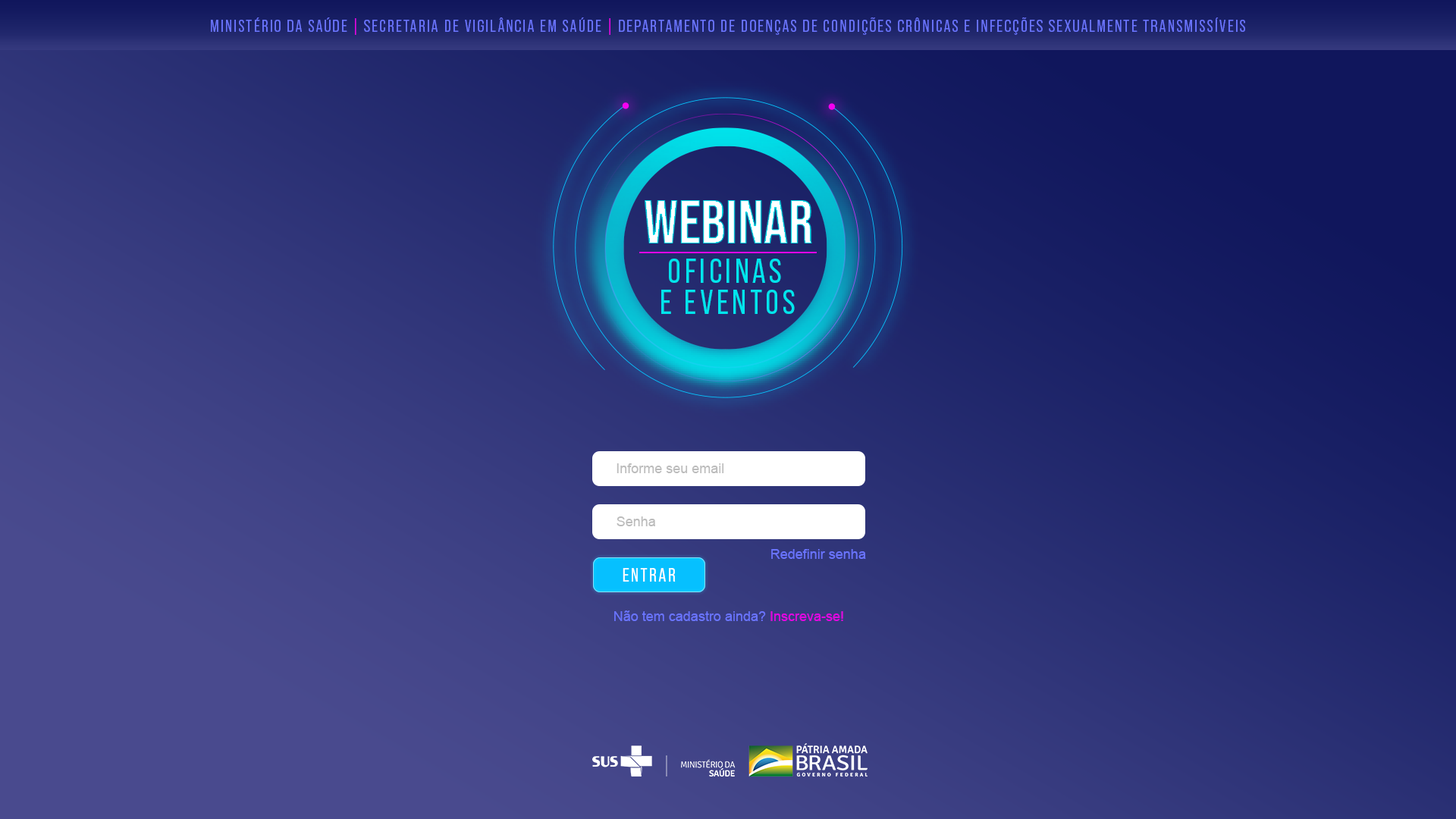
<style>
.page{position:relative;width:1456px;height:819px}
.page>*{position:absolute;margin:0}
.t1{font:16.7px "BebasNeuePro-Regular";letter-spacing:0.1em;color:#6a74ff;text-transform:uppercase}
.t2{font:16.7px "BebasNeuePro-Regular";letter-spacing:0.1em;color:#6a74ff}
.t3{font:16.7px "BebasNeuePro-Regular";letter-spacing:0.1em;color:#e504e5}
.t4{font:34px/30.5px "BebasNeuePro-Regular";letter-spacing:0.1em;color:#00e5ed}
.t5{font:13.6px "ArialMT";color:#bcbcbc}
.t6{font:13.6px "ArialMT";color:#6a74ff}
.t7{font:18.8px "BebasNeuePro-Regular";letter-spacing:0.1em;color:#ffffff}
.t8{font:13.6px "ArialMT";color:#e304e3}
</style>
<div class="page">
<p class="t1" style="left:211px;top:17px;width:1034px;height:18px"><span class="t2">MINISTÉRIO DA SAÚDE </span><span class="t3">|</span><span class="t2"> SECRETARIA DE VIGILÂNCIA EM SAÚDE </span><span class="t3">| </span>Departamento de Doenças de Condições Crônicas e Infecções Sexualmente Transmissíveis</p>
<p class="t4" style="left:661px;top:259px;width:134px;height:55px;text-align:center">OFICINAS <br>E EVENTOS</p>
<p class="t5" style="left:617px;top:463px;width:107px;height:10px">Informe seu email</p>
<p class="t5" style="left:617px;top:516px;width:38px;height:10px">Senha</p>
<p class="t6" style="left:771px;top:549px;width:95px;height:10px">Redefinir senha</p>
<p class="t7" style="left:623px;top:568px;width:53px;height:14px">ENTRAR</p>
<p class="t6" style="left:614px;top:610px;width:229px;height:11px">Não tem cadastro ainda? <span class="t8">Inscreva-se!</span></p>
</div>
